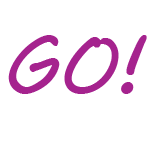
<style>
.page{position:relative;width:150px;height:150px;background:#ffffff}
.page>*{position:absolute;margin:0}
.t1{font:82.8px "MVBoli";color:#a5238e}
</style>
<div class="page">
<p class="t1" style="left:8px;top:35px;width:139px;height:59px">GO!</p>
</div>
